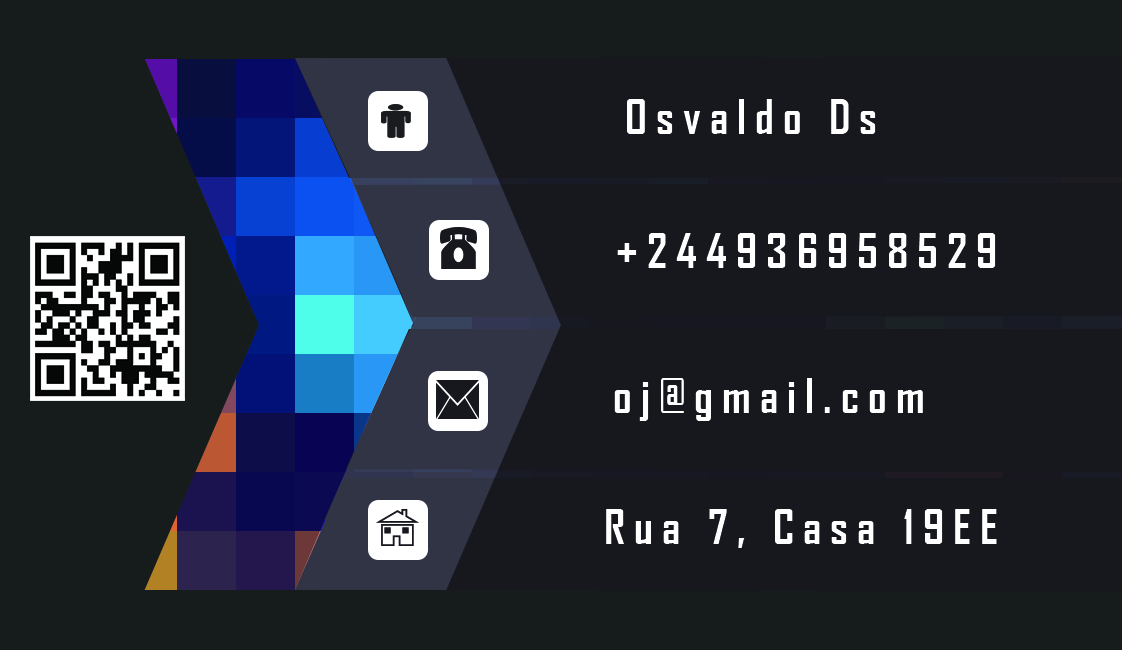
<style>
.page{position:relative;width:1122px;height:650px;background:#17181e}
.page>*{position:absolute;margin:0}
.t1{font:45.7px "AgencyFB-Bold";letter-spacing:0.2em;color:#ffffff}
</style>
<div class="page">
<p class="t1" style="left:627px;top:99px;width:249px;height:35px">Osvaldo Ds</p>
<p class="t1" style="left:617px;top:233px;width:379px;height:35px">+244936958529</p>
<p class="t1" style="left:614px;top:378px;width:309px;height:43px">oj@gmail.com</p>
<p class="t1" style="left:606px;top:509px;width:391px;height:39px">Rua 7, Casa 19EE</p>
</div>
